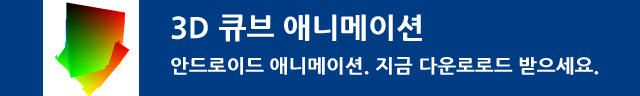
<style>
.page{position:relative;width:640px;height:96px;background:#003c83}
.page>*{position:absolute;margin:0}
.t1{font:28.8px "NanumGothicExtraBold";color:#ffffff;scale:1.04 1}
.t2{font:19.2px "NanumGothicExtraBold";color:#ffffff;scale:1.04 1}
</style>
<div class="page">
<p class="t1" style="left:171px;top:14px;width:251px;height:28px">3D 큐브 애니메이션</p>
<p class="t2" style="left:171px;top:57px;width:428px;height:18px">안드로이드 애니메이션. 지금 다운로로드 받으세요.</p>
</div>
